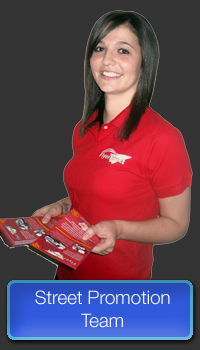
<style>
.page{position:relative;width:200px;height:350px;background:#333333}
.page>*{position:absolute;margin:0}
.t1{font:18.7px "HelveticaNeueLTPro-Lt";color:#ffffff}
</style>
<div class="page">
<p class="t1" style="left:35px;top:290px;width:135px;height:38px;text-align:center">Street Promotion<br>Team</p>
</div>
